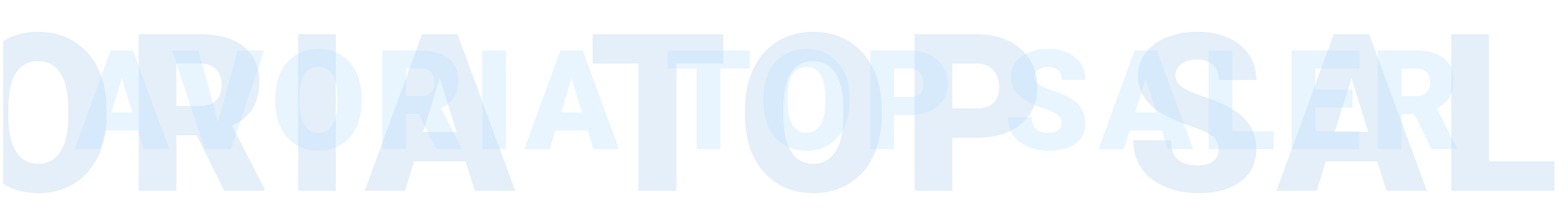
<style>
.page{position:relative;width:1568px;height:220px;background:#ffffff}
.page>*{position:absolute;margin:0}
.t1{font:138.3px "Roboto-Black";letter-spacing:0.06em;color:#e8f5ff}
</style>
<div class="page">
<p class="t1" style="left:74px;top:49px;width:1383px;height:101px">AVORIA TOP SALER</p>
</div>
